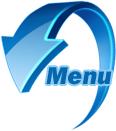
<style>
.page{position:relative;width:116px;height:131px;background:#ffffff}
.page>*{position:absolute;margin:0}
.t1{font:25.3px "FranklinGothic-HeavyItalic";color:#0567af}
</style>
<div class="page">
<p class="t1" style="left:46px;top:67px;width:66px;height:18px">Menu</p>
</div>
